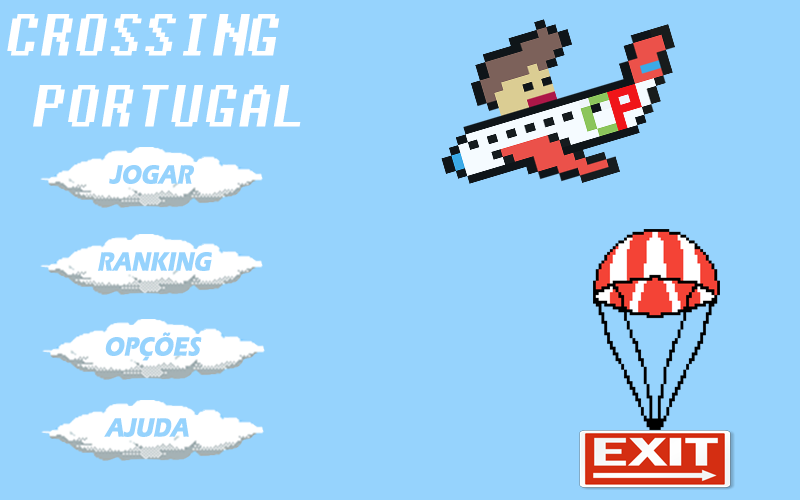
<style>
.page{position:relative;width:800px;height:500px;background:#96d3fd}
.page>*{position:absolute;margin:0}
.t1{font:59.2px "Fixedsys";color:#ffffff;font-style:italic;scale:0.93 1}
.t2{font:27.1px "ErasITC-Bold";color:#96d3fd;font-style:italic;scale:0.83 1}
</style>
<div class="page">
<p class="t1" style="left:7px;top:14px;width:294px;height:113px">CROSSING <br> PORTUGAL</p>
<p class="t2" style="left:109px;top:165px;width:85px;height:19px">JOGAR</p>
<p class="t2" style="left:98px;top:252px;width:114px;height:19px">RANKING</p>
<p class="t2" style="left:105px;top:332px;width:97px;height:29px">OPÇÕES</p>
<p class="t2" style="left:104px;top:418px;width:85px;height:19px">AJUDA</p>
</div>
